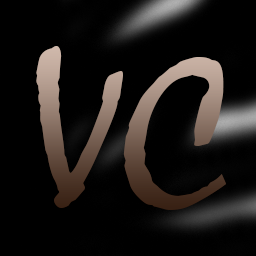
<style>
.page{position:relative;width:256px;height:256px;background:#000000}
.page>*{position:absolute;margin:0}
.t1{font:220px "Mistral"}
</style>
<div class="page">
<p class="t1" style="left:36px;top:46px;width:191px;height:164px">VC</p>
</div>
